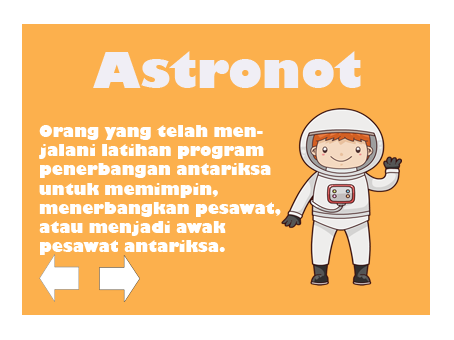
<style>
.page{position:relative;width:454px;height:340px;background:#fcb04d}
.page>*{position:absolute;margin:0}
.t1{font:48px "GillSans-UltraBold";color:#f0eef5}
.t2{font:16px "GillSans-UltraBold";color:#ffffff}
</style>
<div class="page">
<p class="t1" style="left:93px;top:51px;width:268px;height:37px">Astronot</p>
<p class="t2" style="left:39px;top:125px;width:242px;height:130px">Orang yang telah men-<br>jalani latihan program <br>penerbangan antariksa <br>untuk memimpin, <br>menerbangkan pesawat, <br>atau menjadi awak <br>pesawat antariksa.</p>
</div>
